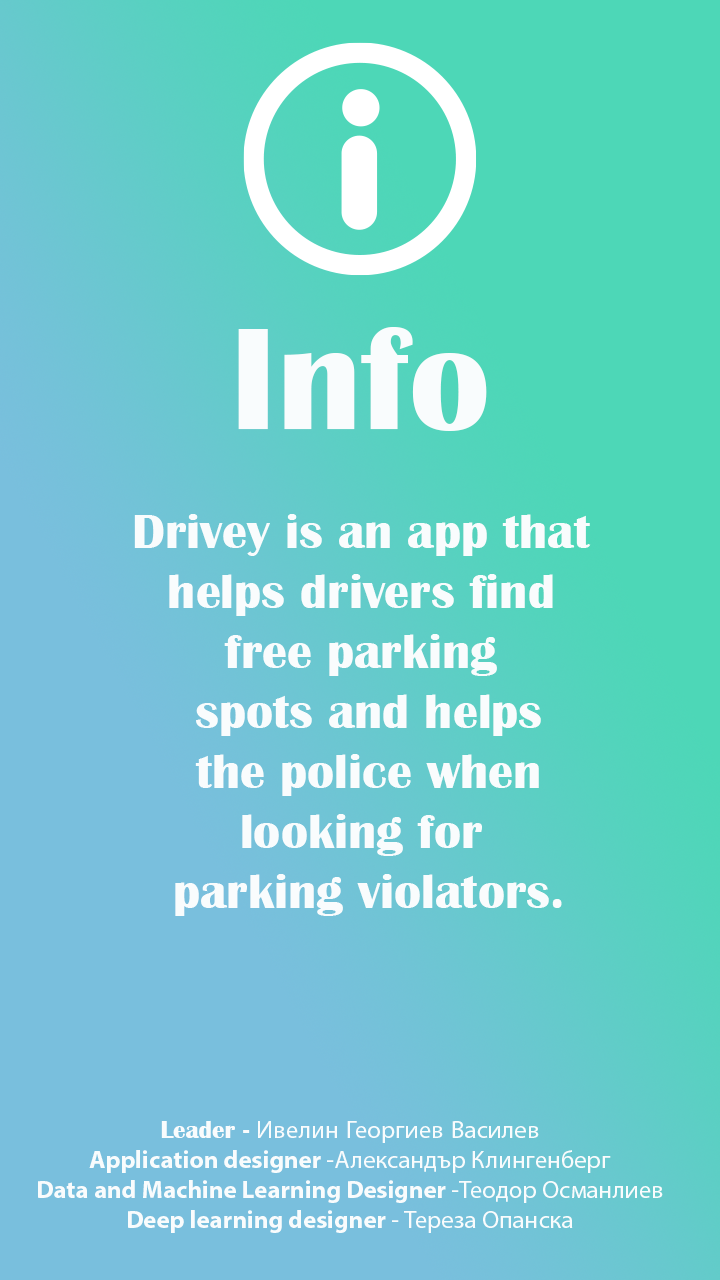
<style>
.page{position:relative;width:720px;height:1280px}
.page>*{position:absolute;margin:0}
.t1{font:150px "BritannicBold";color:#f9fcfd}
.t2{font:50px "BritannicBold";color:#f9fcfd}
.t3{font:25px "MyriadPro-Bold";color:#f9fcfd}
.t4{font:25px "BritannicBold";color:#f9fcfd}
.t5{font:25px "MyriadPro-Regular";color:#f9fcfd}
</style>
<div class="page">
<p class="t1" style="left:238px;top:327px;width:249px;height:104px">Info</p>
<p class="t2" style="left:134px;top:514px;width:457px;height:402px;text-align:center">Drivey is an app that <br>helps drivers find <br>free parking <br>spots and helps<br> the police when <br>looking for <br>parking violators.</p>
<p class="t3" style="left:38px;top:1120px;width:625px;height:113px;text-align:center"><span class="t4">Leader - </span><span class="t5">Ивелин Георгиев Василев<br></span>Application designer<span class="t5"> -Александър Клингенберг <br></span>Data and Machine Learning Designer<span class="t5"> -Теодор Османлиев <br></span>Deep learning designer<span class="t5"> - Тереза Опанска</span></p>
</div>
